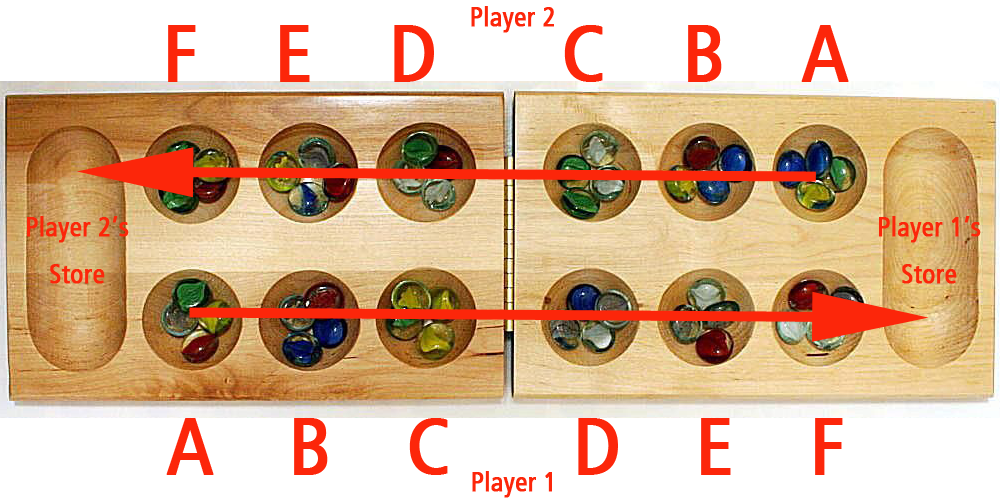
<style>
.page{position:relative;width:1000px;height:500px;background:#ffffff}
.page>*{position:absolute;margin:0}
.t1{font:26.7px "FrutigerCn";color:#fc260a;font-weight:bold}
.t2{font:80px "FrutigerCn";letter-spacing:0.34em;color:#fc260a;font-weight:bold}
.t3{font:80px "FrutigerCn";letter-spacing:0.33em;color:#fc260a;font-weight:bold}
</style>
<div class="page">
<p class="t1" style="left:471px;top:6px;width:83px;height:27px">Player 2</p>
<p class="t2" style="left:168px;top:25px;width:681px;height:57px">F E D  C B A</p>
<p class="t1" style="left:27px;top:216px;width:102px;height:68px;text-align:center">Player 2’s<br>Store</p>
<p class="t1" style="left:879px;top:216px;width:102px;height:68px;text-align:center">Player 1’s<br>Store</p>
<p class="t3" style="left:166px;top:418px;width:677px;height:57px">A B C  D E F</p>
<p class="t1" style="left:472px;top:471px;width:80px;height:27px">Player 1</p>
</div>
